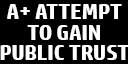
<style>
.page{position:relative;width:128px;height:64px;background:#000000}
.page>*{position:absolute;margin:0}
.t1{font:22.3px/20.8px "HPSimplified-Bold";letter-spacing:-0.01em;color:#ffffff}
</style>
<div class="page">
<p class="t1" style="left:0px;top:4px;width:129px;height:56px;text-align:center">A+ ATTEMPT<br>TO GAIN<br>PUBLIC TRUST</p>
</div>
